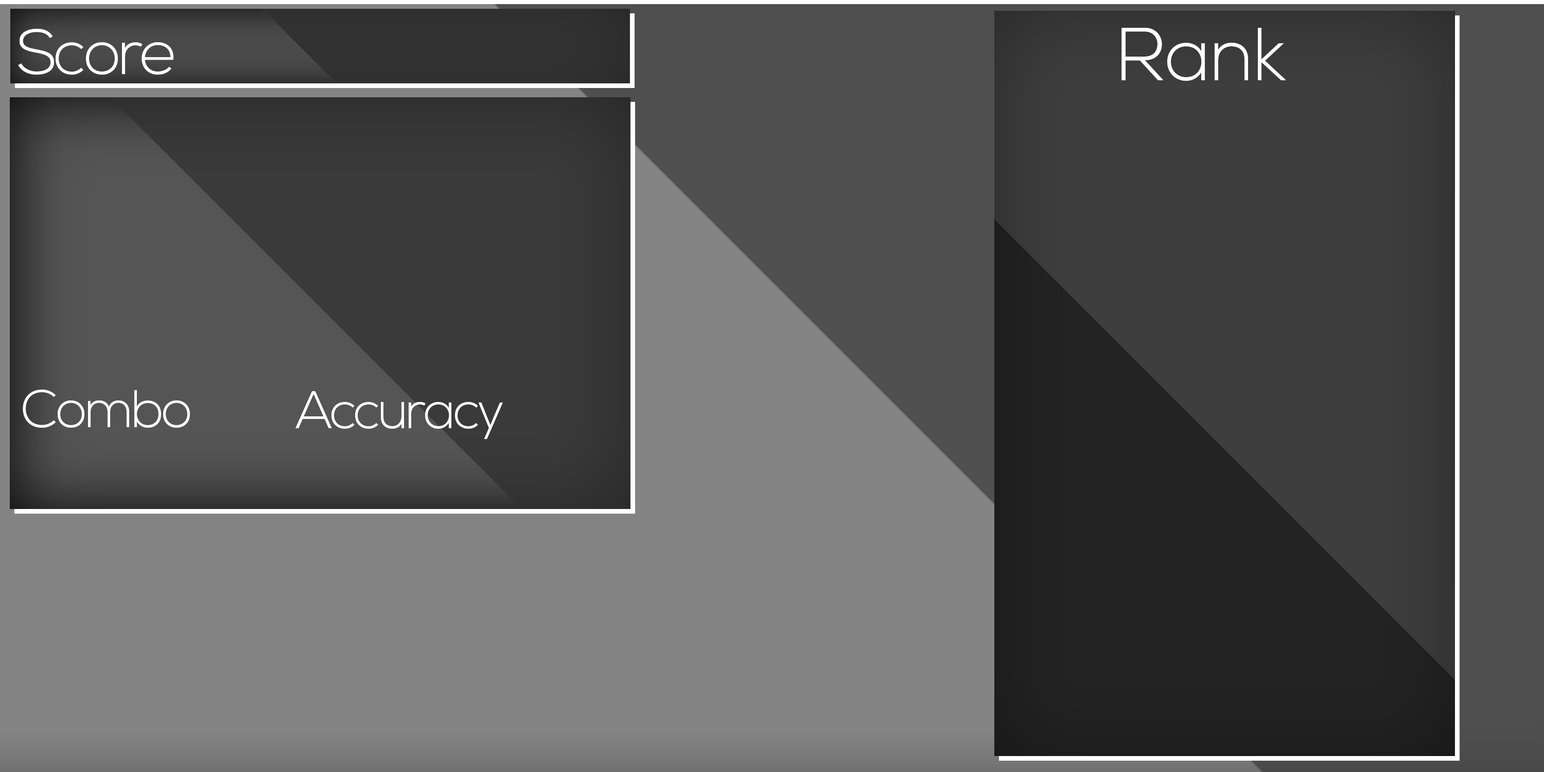
<style>
.page{position:relative;width:1544px;height:772px;background:#848484}
.page>*{position:absolute;margin:0}
.t1{font:63.7px "NexaLight";letter-spacing:-0.05em;color:#ffffff}
.t2{font:74.7px "NexaLight";color:#ffffff}
.t3{font:53.1px "NexaLight";letter-spacing:-0.05em;color:#ffffff}
.t4{font:52.7px "NexaLight";letter-spacing:-0.05em;color:#ffffff}
</style>
<div class="page">
<p class="t1" style="left:18px;top:28px;width:155px;height:47px">Score</p>
<p class="t2" style="left:1122px;top:28px;width:164px;height:53px">Rank</p>
<p class="t3" style="left:23px;top:389px;width:167px;height:39px">Combo</p>
<p class="t4" style="left:295px;top:391px;width:208px;height:48px">Accuracy</p>
</div>
